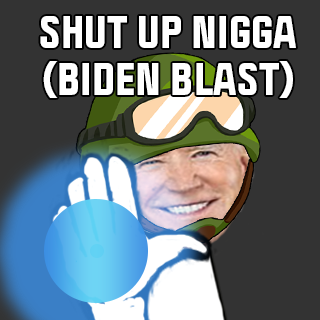
<style>
.page{position:relative;width:320px;height:320px;background:#333333}
.page>*{position:absolute;margin:0}
.t1{font:40.1px/30.1px "Politica-Black";color:#ffffff;text-transform:uppercase}
</style>
<div class="page">
<p class="t1" style="left:40px;top:16px;width:256px;height:82px;text-align:center">shut up nigga<br>(BIDEN Blast)</p>
</div>
